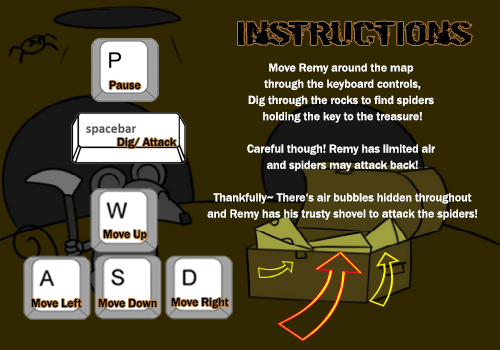
<style>
.page{position:relative;width:500px;height:350px;background:#312701}
.page>*{position:absolute;margin:0}
.t1{font:36px "DirtyEgo";color:#000000;scale:1.8 1}
.t2{font:12px "FranklinGothic-Medium";color:#ffffff}
.t3{font:12px "FranklinGothic-Medium";color:#000000}
</style>
<div class="page">
<p class="t1" style="left:237px;top:21px;width:236px;height:25px">Instructions</p>
<p class="t2" style="left:207px;top:63px;width:271px;height:157px;text-align:center">Move Remy around the map <br>through the keyboard controls,<br>Dig through the rocks to find spiders <br>holding the key to the treasure!<br><br>Careful though! Remy has limited air <br>and spiders may attack back!<br><br>Thankfully~ There‘s air bubbles hidden throughout<br>and Remy has his trusty shovel to attack the spiders!</p>
<p class="t3" style="left:109px;top:81px;width:32px;height:9px">Pause</p>
<p class="t3" style="left:117px;top:138px;width:60px;height:11px">Dig/ Attack</p>
<p class="t3" style="left:103px;top:230px;width:44px;height:10px">Move Up</p>
<p class="t3" style="left:31px;top:298px;width:51px;height:10px">Move Left</p>
<p class="t3" style="left:98px;top:299px;width:59px;height:9px">Move Down</p>
<p class="t3" style="left:171px;top:298px;width:58px;height:11px">Move Right</p>
</div>
